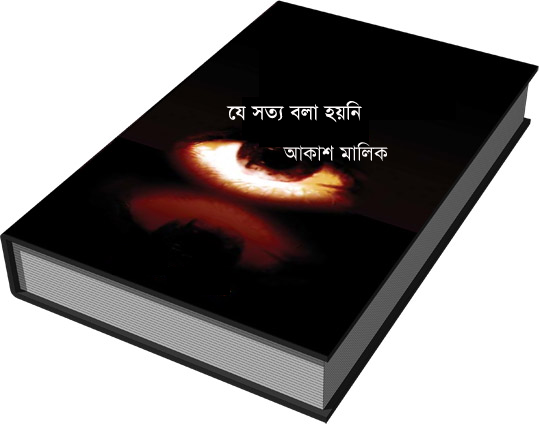
<style>
.page{position:relative;width:539px;height:424px;background:#ffffff}
.page>*{position:absolute;margin:0}
.t1{font:24px "TimesNewRomanPSMT";color:#fdfafa}
</style>
<div class="page">
<p class="t1" style="left:226px;top:101px;width:136px;height:22px">‡h mZ¨ ejv nqwb</p>
<p class="t1" style="left:282px;top:142px;width:106px;height:19px">AvKvk gvwjK</p>
</div>
